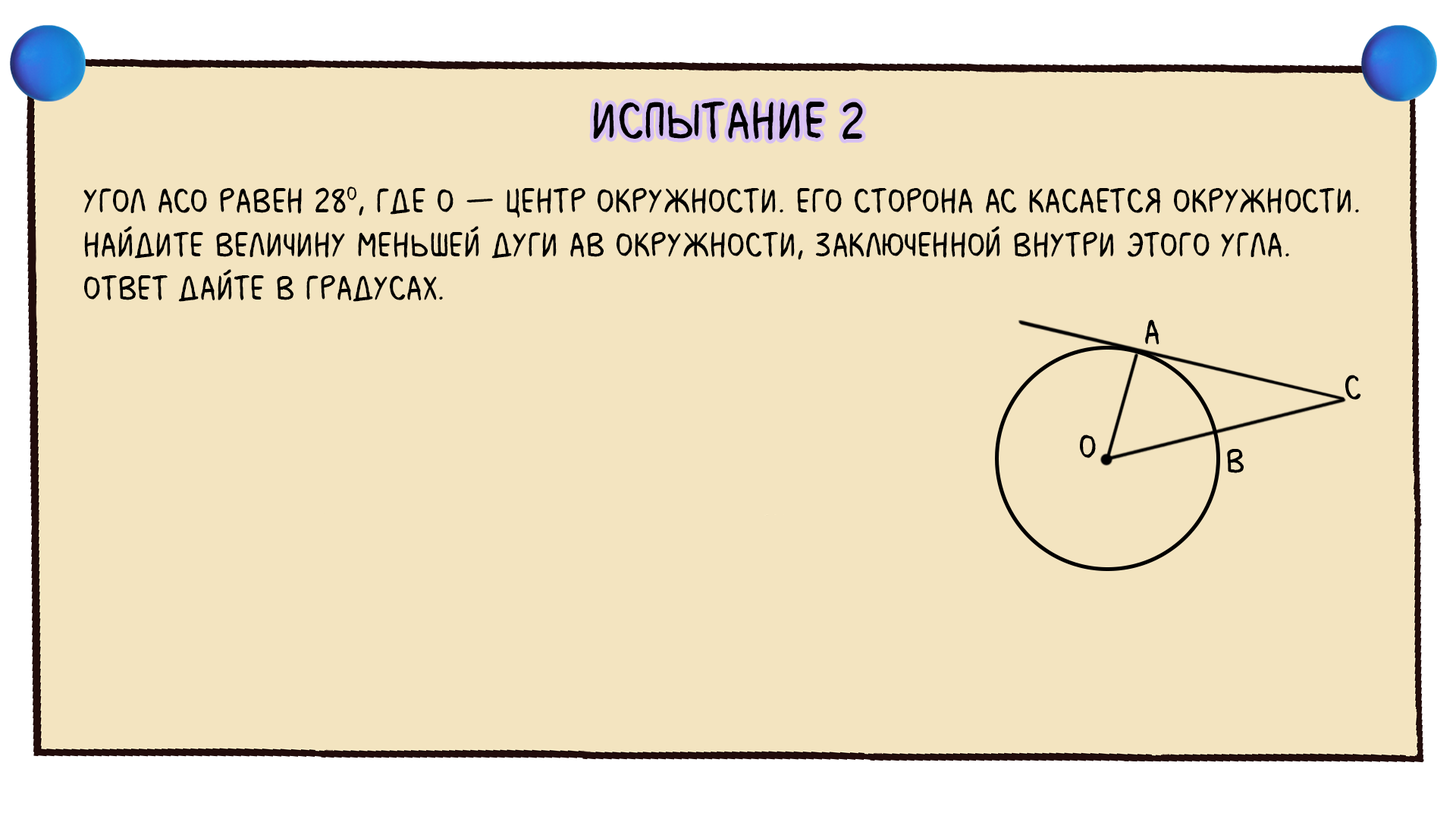
<style>
.page{position:relative;width:1456px;height:819px;background:#f3e4c0}
.page>*{position:absolute;margin:0}
.t1{font:54.6px "MilkMustacheBB";color:#000000}
.t2{font:36.4px "MilkMustacheBB";color:#000000;text-transform:uppercase}
.t3{font:36.4px "MilkMustacheBB";color:#000000}
</style>
<div class="page">
<p class="t1" style="left:593px;top:101px;width:270px;height:39px">испытание 2</p>
<p class="t2" style="left:83px;top:187px;width:1276px;height:115px"><span class="t3">Угол ACO равен 28О</span>, где O — центр окружности. Его сторона Ac касается окружности. <br>Найдите величину меньшей дуги AB окружности, заключенной внутри этого угла. <br>Ответ дайте в градусах.</p>
</div>
